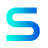
<style>
.page{position:relative;width:48px;height:48px;background:#ffffff}
.page>*{position:absolute;margin:0}
.t1{font:48px "Audiowide-Regular"}
</style>
<div class="page">
<p class="t1" style="left:6px;top:7px;width:34px;height:34px">S</p>
</div>
